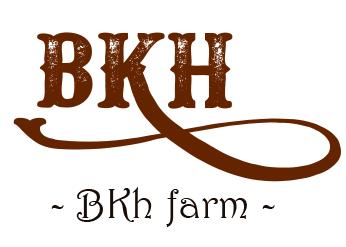
<style>
.page{position:relative;width:346px;height:247px;background:#ffffff}
.page>*{position:absolute;margin:0}
.t1{font:119px "Docktrin";color:#652400}
.t2{font:43px "Harrington";color:#180d07}
</style>
<div class="page">
<p class="t1" style="left:13px;top:32px;width:328px;height:150px">BKH</p>
<p class="t2" style="left:51px;top:187px;width:224px;height:40px">- BKh farm -</p>
</div>
